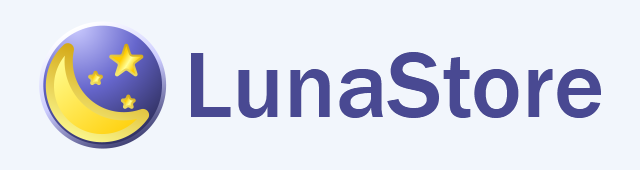
<style>
.page{position:relative;width:640px;height:170px;background:#f2f6fc}
.page>*{position:absolute;margin:0}
.t1{font:96px "FranklinGothic-Medium";color:#494992}
</style>
<div class="page">
<p class="t1" style="left:191px;top:52px;width:410px;height:66px">LunaStore</p>
</div>
